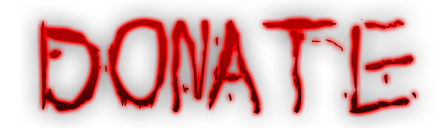
<style>
.page{position:relative;width:437px;height:128px}
.page>*{position:absolute;margin:0}
.t1{font:133.2px "AboutDead"}
</style>
<div class="page">
<p class="t1" style="left:41px;top:19px;width:376px;height:95px">Donate</p>
</div>
